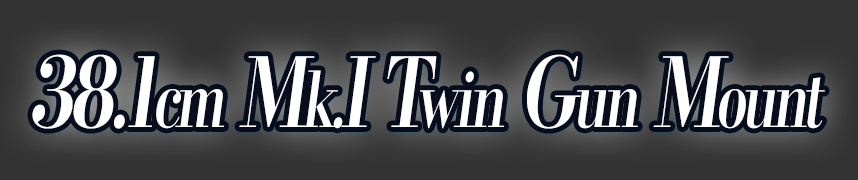
<style>
.page{position:relative;width:858px;height:180px;background:#333333}
.page>*{position:absolute;margin:0}
.t1{font:96px "KochoStd-Heavy";letter-spacing:-0.08em;color:#ffffff;font-style:italic;scale:0.75 1}
.t2{font:76.8px "KochoStd-Heavy";letter-spacing:-0.08em;color:#ffffff;font-style:italic;scale:0.75 1}
</style>
<div class="page">
<p class="t1" style="left:32px;top:54px;width:793px;height:75px">38.1<span class="t2">cm</span> M<span class="t2">k.</span>I T<span class="t2">win</span> G<span class="t2">un</span> M<span class="t2">ount</span></p>
</div>
